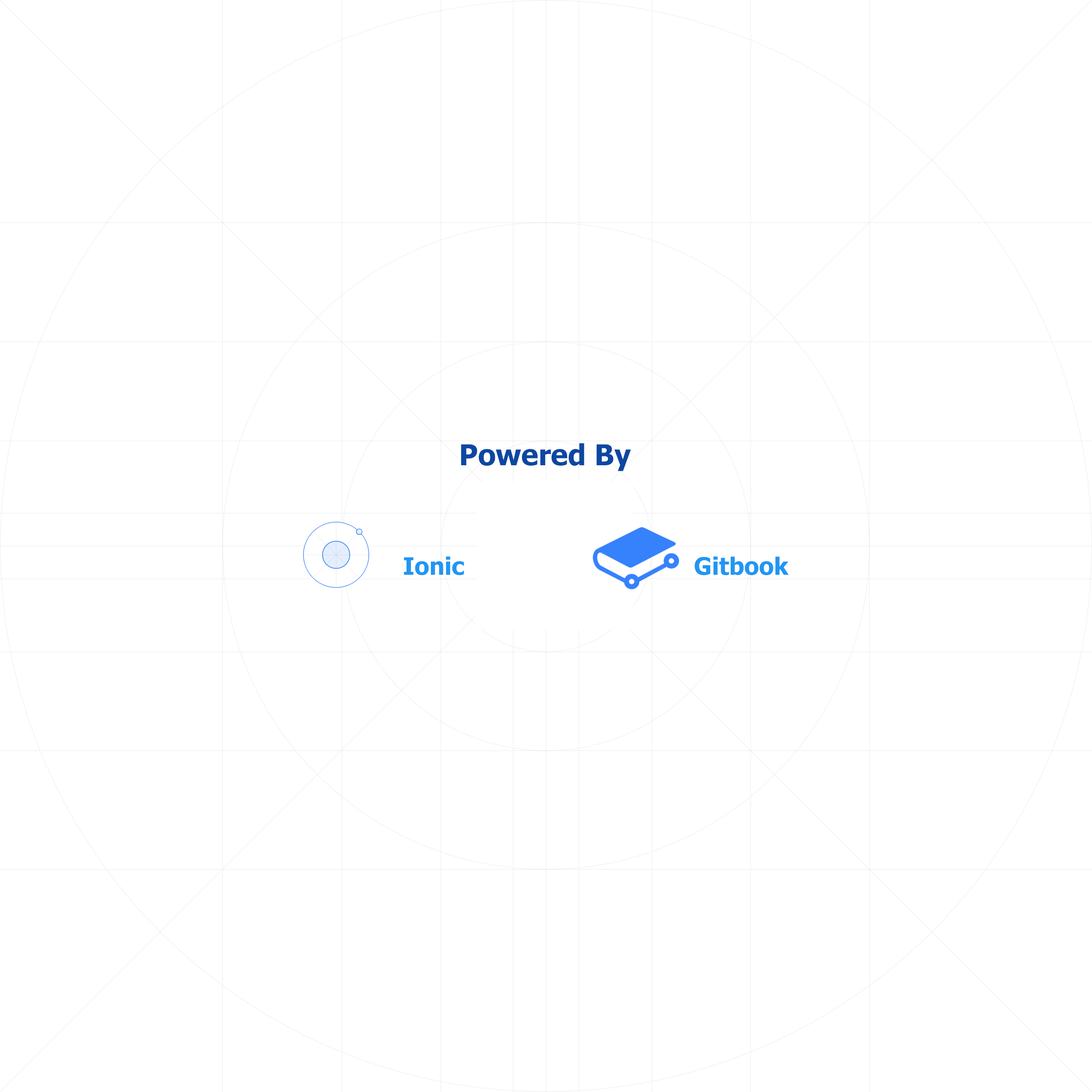
<style>
.page{position:relative;width:1092px;height:1092px;background:#ffffff}
.page>*{position:absolute;margin:0}
.t1{font:28.8px "Tahoma-Bold";color:#0d47a1}
.t2{font:24px "Tahoma-Bold";color:#2196f3}
</style>
<div class="page">
<p class="t1" style="left:461px;top:443px;width:170px;height:28px">Powered By</p>
<p class="t2" style="left:404px;top:556px;width:60px;height:19px">Ionic</p>
<p class="t2" style="left:695px;top:556px;width:94px;height:19px">Gitbook</p>
</div>
